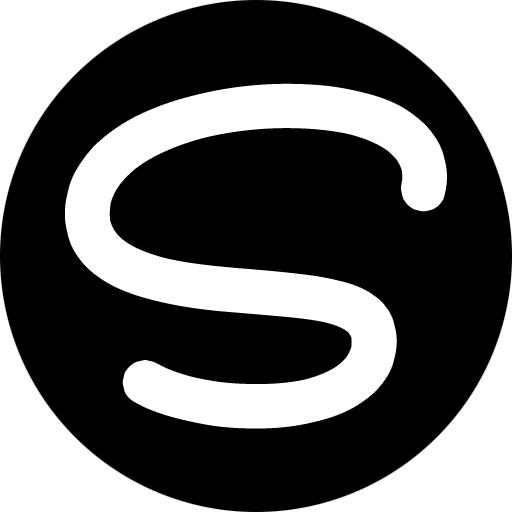
<style>
.page{position:relative;width:512px;height:512px;background:#000000}
.page>*{position:absolute;margin:0}
.t1{font:420px "Sacramento-Regular";color:#ffffff;font-weight:bold}
</style>
<div class="page">
<p class="t1" style="left:78px;top:96px;width:356px;height:320px">S</p>
</div>
